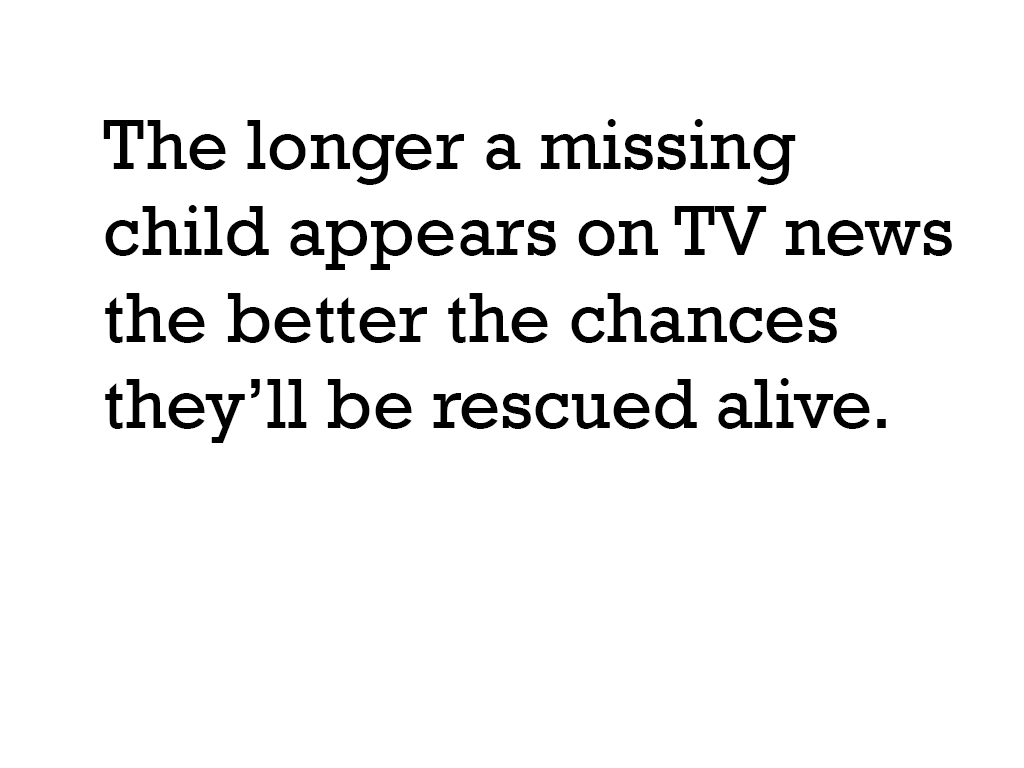
<style>
.page{position:relative;width:1024px;height:768px;background:#ffffff}
.page>*{position:absolute;margin:0}
.t1{font:72px "Rockwell";color:#000000}
</style>
<div class="page">
<p class="t1" style="left:103px;top:119px;width:849px;height:324px">The longer a missing child appears on TV news the better the chances they’ll be rescued alive.</p>
</div>
